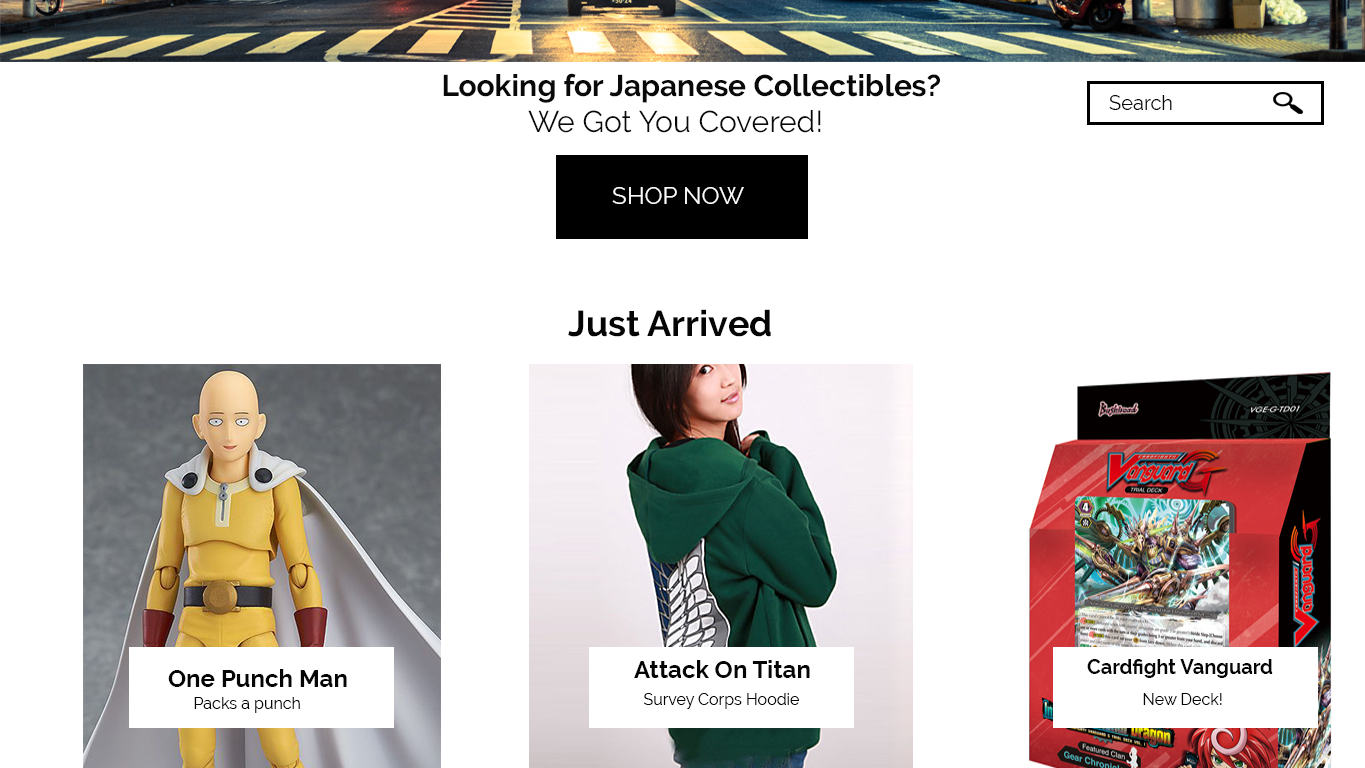
<style>
.page{position:relative;width:1365px;height:768px;background:#ffffff}
.page>*{position:absolute;margin:0}
.t1{font:30px "Raleway-Bold";color:#090909}
.t2{font:30px "Raleway-Regular";color:#090909}
.t3{font:20px "Raleway-Regular";color:#090909}
.t4{font:24px "Raleway-Regular";color:#fdfbfb}
.t5{font:36px "Raleway-Bold";color:#050505}
.t6{font:24px "Raleway-Bold";color:#050505}
.t7{font:20px "Raleway-Bold";color:#050505}
.t8{font:16px "Raleway-Regular";color:#050505}
</style>
<div class="page">
<p class="t1" style="left:443px;top:73px;width:497px;height:60px">Looking for Japanese Collectibles?<br><span class="t2">    We Got You Covered!</span></p>
<p class="t3" style="left:1109px;top:95px;width:63px;height:15px">Search</p>
<p class="t4" style="left:612px;top:187px;width:132px;height:17px">SHOP NOW</p>
<p class="t5" style="left:568px;top:309px;width:203px;height:28px">Just Arrived</p>
<p class="t6" style="left:634px;top:660px;width:176px;height:18px">Attack On Titan</p>
<p class="t7" style="left:1087px;top:659px;width:186px;height:19px"><span class="t6"><br></span>Cardfight Vanguard</p>
<p class="t6" style="left:168px;top:669px;width:179px;height:18px"><span class="t5"> <br></span>One Punch Man</p>
<p class="t8" style="left:194px;top:697px;width:106px;height:16px">Packs a punch</p>
<p class="t8" style="left:643px;top:693px;width:156px;height:16px">Survey Corps Hoodie</p>
<p class="t8" style="left:1143px;top:693px;width:79px;height:12px">New Deck!</p>
</div>
